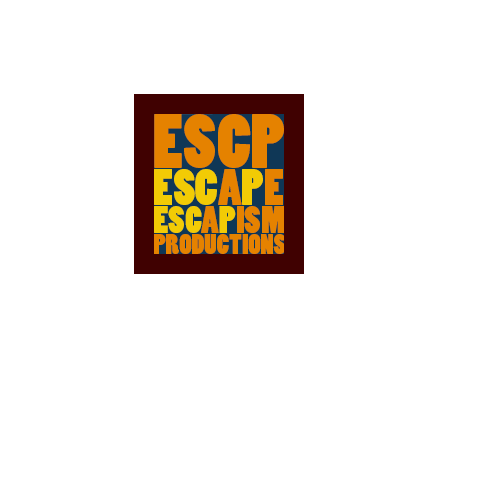
<style>
.page{position:relative;width:500px;height:500px;background:#ffffff}
.page>*{position:absolute;margin:0}
.t1{font:72px "PoplarStd";color:#e58200}
.t2{font:48px "PoplarStd";color:#f2cb05}
.t3{font:48px "PoplarStd";color:#e58200}
.t4{font:36px "PoplarStd";color:#f2cb05}
.t5{font:36px "PoplarStd";color:#e58200}
.t6{font:27px "PoplarStd";color:#e58200}
</style>
<div class="page">
<p class="t1" style="left:154px;top:114px;width:130px;height:54px">ESCP</p>
<p class="t2" style="left:154px;top:169px;width:129px;height:36px">ESC<span class="t3">A</span>P<span class="t3">E</span></p>
<p class="t4" style="left:154px;top:206px;width:131px;height:27px">ESC<span class="t5">A</span>P<span class="t5">ISM</span></p>
<p class="t6" style="left:153px;top:234px;width:133px;height:20px">PRODUCTIONS</p>
</div>
